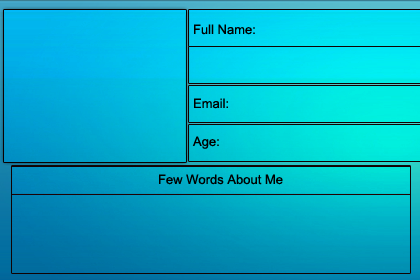
<style>
.page{position:relative;width:420px;height:280px}
.page>*{position:absolute;margin:0}
.t1{font:13px "ArialMT";color:#000000}
</style>
<div class="page">
<p class="t1" style="left:194px;top:24px;width:61px;height:11px">Full Name:</p>
<p class="t1" style="left:194px;top:98px;width:34px;height:11px">Email:</p>
<p class="t1" style="left:192px;top:136px;width:27px;height:13px">Age:</p>
<p class="t1" style="left:159px;top:174px;width:124px;height:11px">Few Words About Me</p>
</div>
